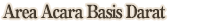
<style>
.page{position:relative;width:204px;height:22px;background:#ffffff}
.page>*{position:absolute;margin:0}
.t1{font:18px "RyuminPro-ExBold";letter-spacing:-0.08em;color:#534738;scale:0.9 1}
</style>
<div class="page">
<p class="t1" style="left:2px;top:4px;width:164px;height:15px">Area Acara Basis Darat</p>
</div>
